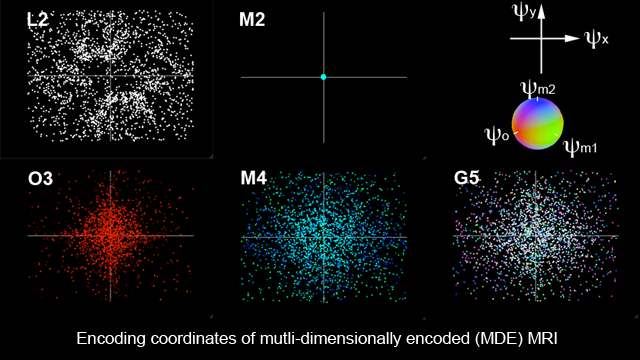
<style>
.page{position:relative;width:640px;height:360px;background:#000000}
.page>*{position:absolute;margin:0}
.t1{font:16.7px "ArialMT";color:#ffffff}
</style>
<div class="page">
<p class="t1" style="left:77px;top:332px;width:480px;height:15px">Encoding coordinates of mutli-dimensionally encoded (MDE) MRI</p>
</div>
